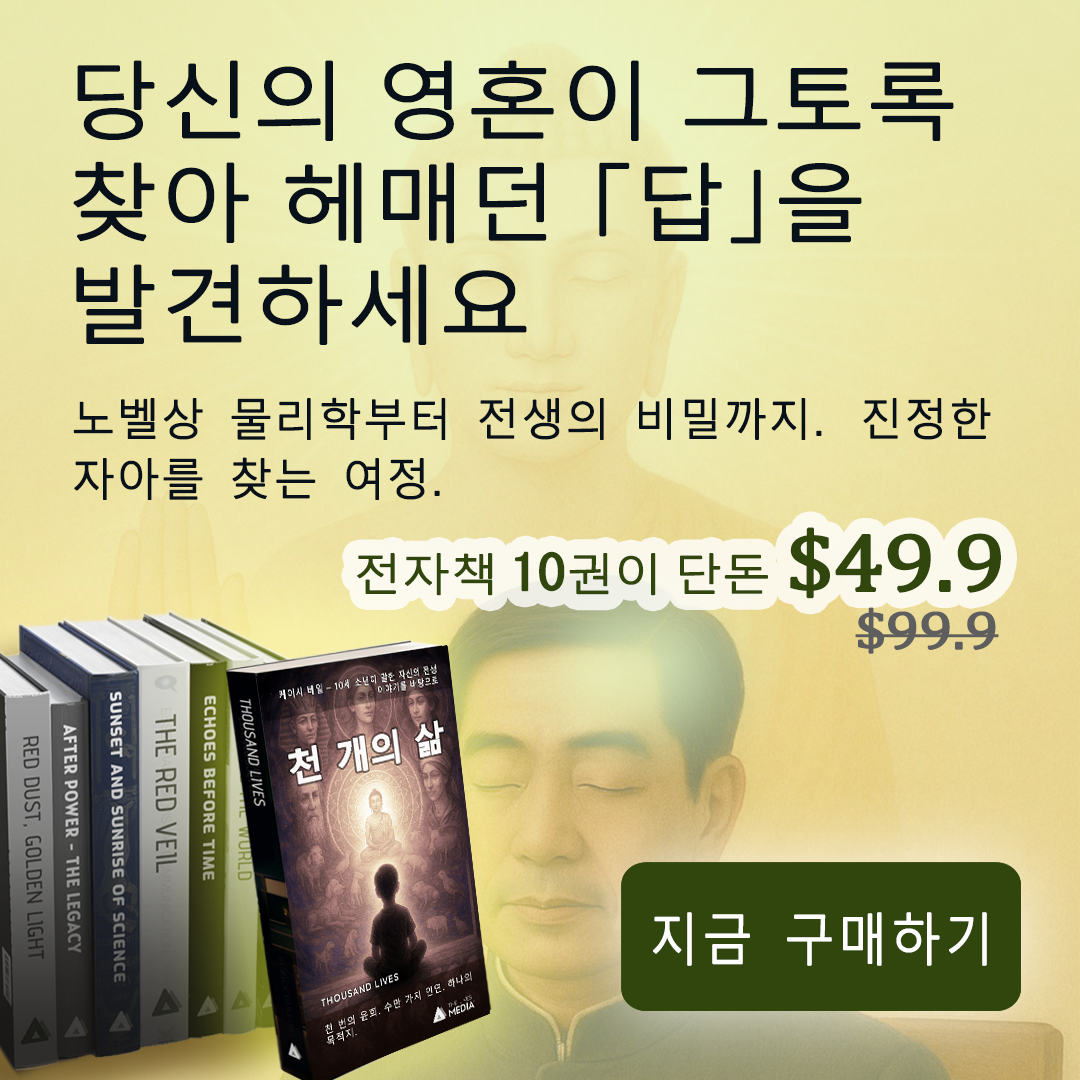
<style>
.page{position:relative;width:1080px;height:1080px}
.page>*{position:absolute;margin:0}
.t1{font:82.8px/102px "MalgunGothic-Semilight";letter-spacing:-0.015em;color:#08101a;font-weight:bold;scale:1.11 1}
.t2{font:82.8px/102px "YuGothic-Regular";letter-spacing:-0.015em;color:#08101a;font-weight:bold;scale:1.11 1}
.t3{font:43.2px/60px "MalgunGothic-Semilight";letter-spacing:0.01em;color:#08101a;font-weight:bold}
.t4{font:43.2px/60px "MS-Gothic";letter-spacing:0.01em;color:#08101a;font-weight:bold}
.t5{font:43.2px "MalgunGothic-Semilight";letter-spacing:-0.025em;color:#31460c;font-weight:bold;scale:1.11 1}
.t6{font:54px "Cambria";letter-spacing:-0.025em;color:#31460c;font-weight:bold;scale:1.11 1}
.t7{font:49.5px "MS-Gothic";letter-spacing:-0.025em;color:#31460c;font-weight:bold;scale:1.11 1}
.t8{font:82.8px "Cambria";letter-spacing:-0.025em;color:#31460c;font-weight:bold;scale:1.11 1}
.t9{font:54px "Cambria";letter-spacing:-0.025em;color:#5f5e5e;font-weight:bold;scale:1.11 1}
.t10{font:55px "MalgunGothic-Semilight";letter-spacing:0.05em;color:#fefefe;font-weight:bold;scale:0.9 1}
</style>
<div class="page">
<p class="t1" style="left:73px;top:60px;width:881px;height:285px">당신의 영혼이 그토록 찾아 헤매던<span class="t2"> 「</span>답<span class="t2">」</span>을 발견하세요</p>
<p class="t3" style="left:73px;top:397px;width:918px;height:103px">노벨상 물리학부터 전생의 비밀까지<span class="t4">. </span>진정한 자아를 찾는 여정<span class="t4">.</span></p>
<p class="t5" style="left:357px;top:527px;width:644px;height:72px"><span class="t6"><br></span>전자책 <span class="t7">10</span>권이 단돈 <span class="t8">$49.9</span></p>
<p class="t9" style="left:855px;top:607px;width:144px;height:47px">$99.9</p>
<p class="t10" style="left:653px;top:912px;width:334px;height:54px">지금 구매하기</p>
</div>
